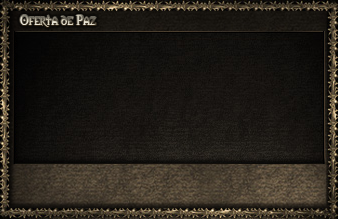
<style>
.page{position:relative;width:338px;height:219px}
.page>*{position:absolute;margin:0}
.t1{font:13px "Morpheus"}
</style>
<div class="page">
<p class="t1" style="left:20px;top:15px;width:76px;height:12px">Oferta de Paz</p>
</div>
